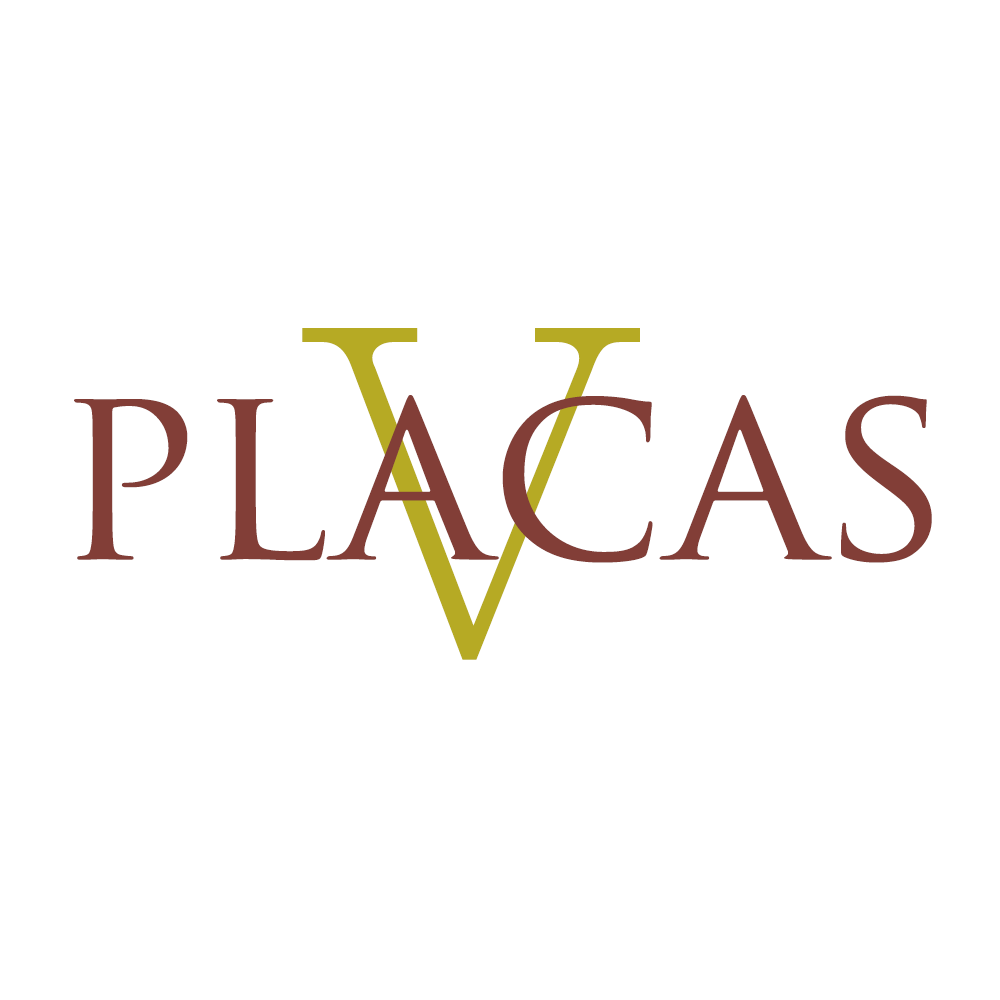
<style>
.page{position:relative;width:1000px;height:1000px;background:#ffffff}
.page>*{position:absolute;margin:0}
.t1{font:450.1px "AdobeMingStd-Light";color:#b6aa24}
.t2{font:250px "TrajanPro-Regular";color:#823e37}
</style>
<div class="page">
<p class="t1" style="left:302px;top:328px;width:338px;height:332px">V</p>
<p class="t2" style="left:74px;top:395px;width:858px;height:168px">placas</p>
</div>
